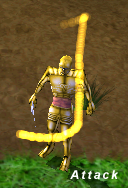
<style>
.page{position:relative;width:128px;height:188px}
.page>*{position:absolute;margin:0}
.t1{font:12px "Arial-BoldItalicMT";letter-spacing:0.18em;color:#ffffff}
</style>
<div class="page">
<p class="t1" style="left:70px;top:170px;width:49px;height:9px">Attack</p>
</div>
